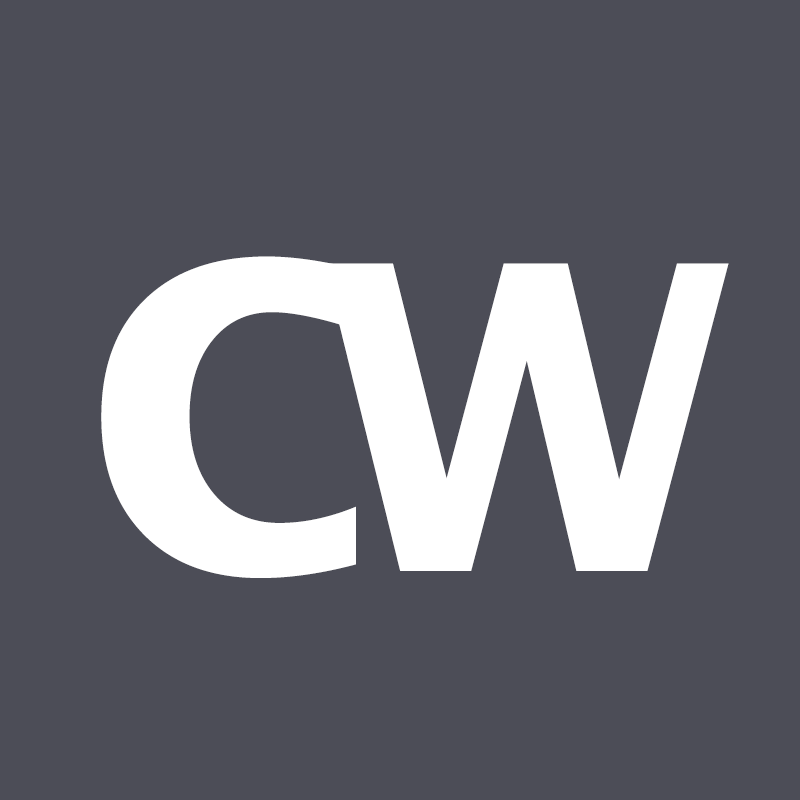
<style>
.page{position:relative;width:800px;height:800px;background:#4c4d57}
.page>*{position:absolute;margin:0}
.t1{font:573.3px "LucidaGrande-Bold";color:#ffffff}
.t2{font:573.4px "LucidaGrande-Bold";color:#ffffff;scale:0.89 1}
</style>
<div class="page">
<p class="t1" style="left:101px;top:256px;width:255px;height:322px">c</p>
<p class="t2" style="left:324px;top:263px;width:405px;height:308px">w</p>
</div>
